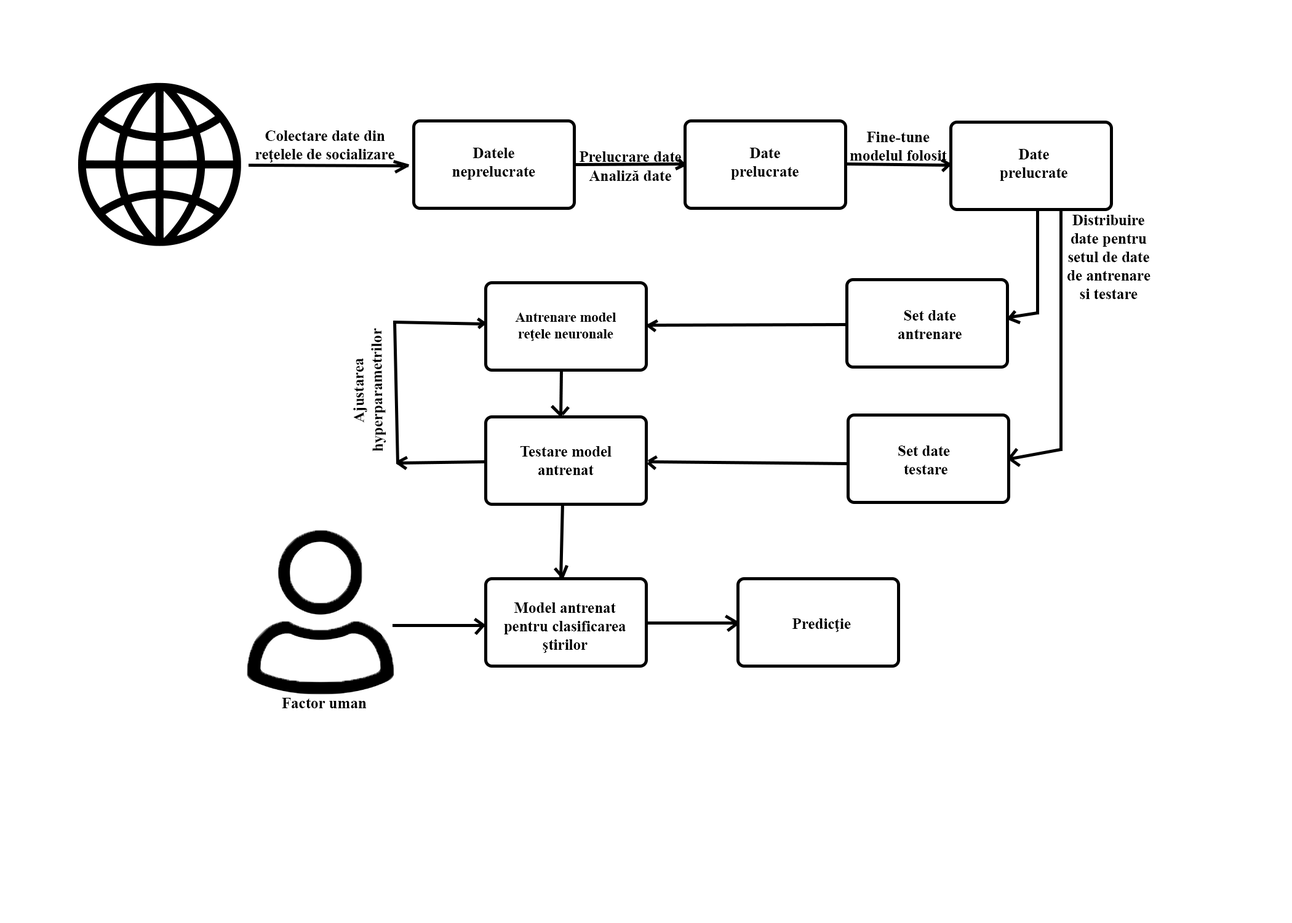
<style>
.page{position:relative;width:1292px;height:923px;background:#ffffff}
.page>*{position:absolute;margin:0}
.t1{font:15.4px "TimesNewRomanPS-BoldMT";color:#000000}
.t2{font:13.8px "TimesNewRomanPS-BoldMT";color:#000000}
</style>
<div class="page">
<p class="t1" style="left:255px;top:130px;width:139px;height:32px;text-align:center">Colectare date din reţelele de socializare</p>
<p class="t1" style="left:850px;top:132px;width:97px;height:29px;text-align:center">Fine-tune modelul folosit</p>
<p class="t1" style="left:452px;top:148px;width:83px;height:32px;text-align:center">Datele neprelucrate</p>
<p class="t1" style="left:731px;top:148px;width:68px;height:32px;text-align:center">Date prelucrate</p>
<p class="t1" style="left:1000px;top:149px;width:67px;height:32px;text-align:center">Date prelucrate</p>
<p class="t1" style="left:580px;top:151px;width:101px;height:11px">Prelucrare date</p>
<p class="t1" style="left:589px;top:170px;width:82px;height:11px">Analiză date</p>
<p class="t1" style="left:1067px;top:215px;width:84px;height:84px;text-align:center">Distribuire date pentru setul de date de antrenare si testare</p>
<p class="t2" style="left:515px;top:313px;width:101px;height:28px;text-align:center">Antrenare model reţele neuronale</p>
<p class="t1" style="left:898px;top:310px;width:64px;height:29px;text-align:center">Set date antrenare</p>
<p class="t1" style="left:353px;top:328px;width:33px;height:124px;rotate:-91deg">Ajustarea hyperparametrilor</p>
<p class="t1" style="left:520px;top:446px;width:92px;height:29px;text-align:center">Testare model antrenat</p>
<p class="t1" style="left:898px;top:445px;width:52px;height:29px;text-align:center">Set date <br>testare</p>
<p class="t1" style="left:504px;top:602px;width:122px;height:51px;text-align:center">Model antrenat pentru clasificarea ştirilor</p>
<p class="t1" style="left:792px;top:618px;width:59px;height:14px">Predicţie</p>
<p class="t1" style="left:282px;top:698px;width:85px;height:10px">Factor uman</p>
</div>
